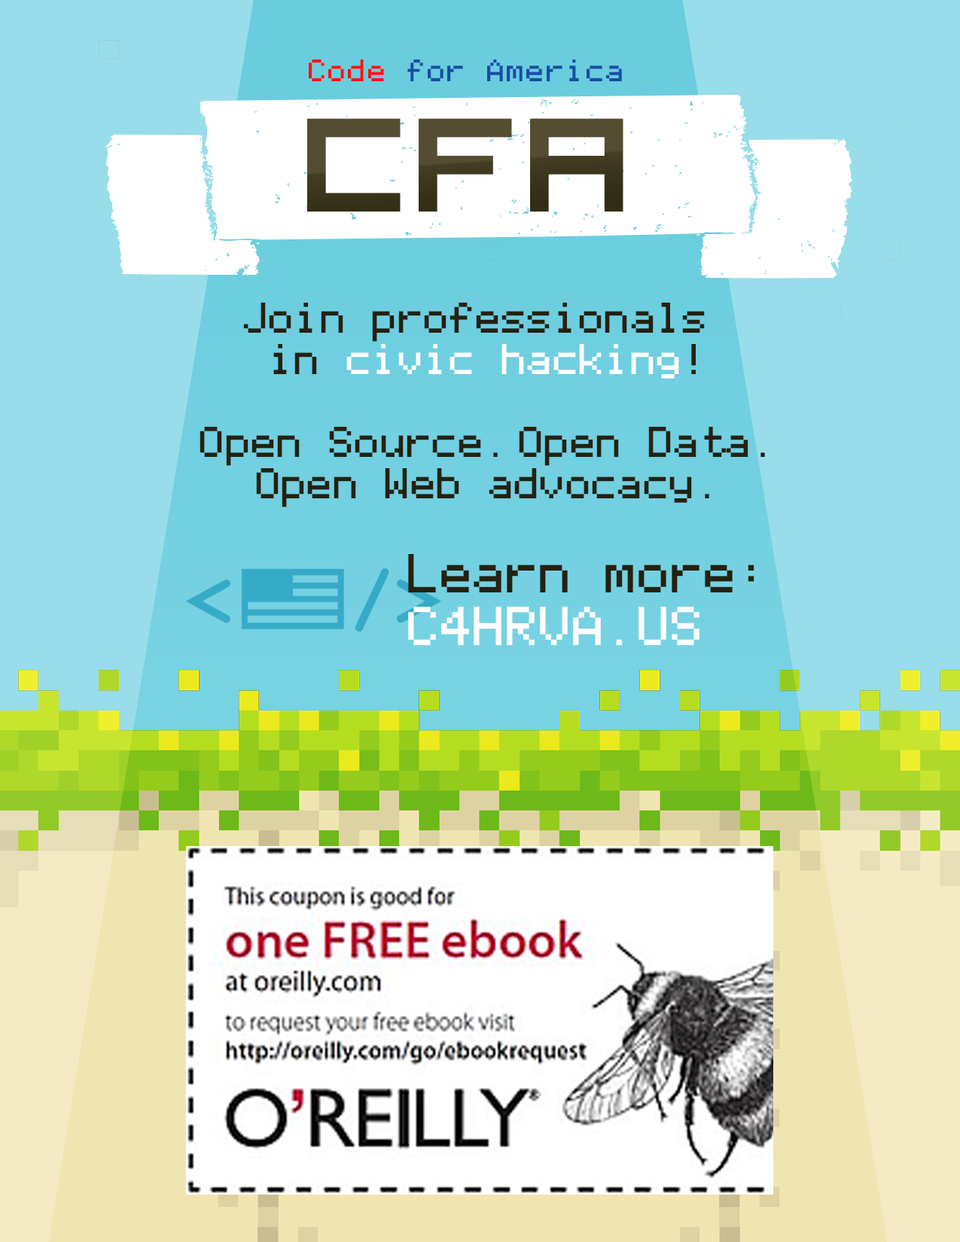
<style>
.page{position:relative;width:960px;height:1242px;background:#98dde9}
.page>*{position:absolute;margin:0}
.t1{font:24.8px "Apple";letter-spacing:-0.2em;color:#194da5}
.t2{font:24.8px "Apple";letter-spacing:-0.2em;color:#ff1212}
.t3{font:372.1px "AdhesiveNrSevenBanners";color:#ffffff}
.t4{font:148.6px "5x5-Pixel"}
.t5{font:34.5px "Apple";letter-spacing:-0.25em;color:#252110}
.t6{font:34.5px "Apple";letter-spacing:-0.25em;color:#ffffff}
.t7{font:43.9px "Apple";letter-spacing:-0.25em;color:#252110}
.t8{font:43.9px "Apple";letter-spacing:-0.25em;color:#fefefe;text-transform:uppercase}
</style>
<div class="page">
<p class="t1" style="left:309px;top:59px;width:313px;height:22px"><span class="t2">Code </span>for America</p>
<p class="t3" style="left:105px;top:95px;width:747px;height:184px">b</p>
<p class="t4" style="left:307px;top:118px;width:316px;height:94px">cfa</p>
<p class="t5" style="left:200px;top:303px;width:565px;height:204px;text-align:center">Join professionals <br>in <span class="t6">civic hacking</span>!<br><br>Open Source. Open Data.<br>Open Web advocacy.</p>
<p class="t7" style="left:408px;top:554px;width:346px;height:91px">Learn more:<br><span class="t8">c4hrva.us</span></p>
</div>
